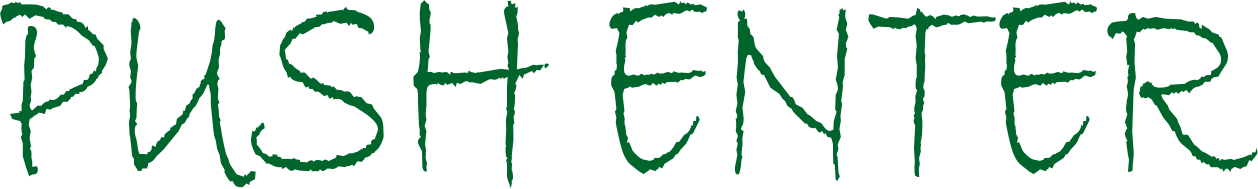
<style>
.page{position:relative;width:1258px;height:189px;background:#ffffff}
.page>*{position:absolute;margin:0}
.t1{font:313px "BradleyHandITC";color:#00642d;scale:0.64 1}
</style>
<div class="page">
<p class="t1" style="left:0px;top:0px;width:1258px;height:189px">PUSH ENTER</p>
</div>
